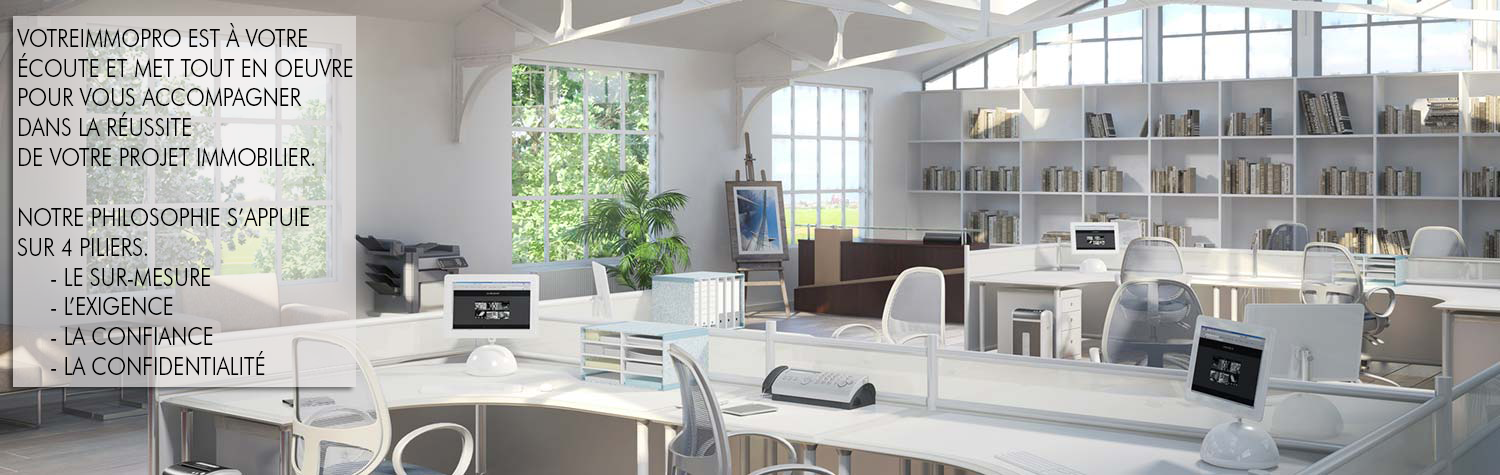
<style>
.page{position:relative;width:1500px;height:475px}
.page>*{position:absolute;margin:0}
.t1{font:24.9px "FuturaBT-Light";color:#000000;text-transform:uppercase;scale:0.87 1}
</style>
<div class="page">
<p class="t1" style="left:17px;top:23px;width:336px;height:353px">Votreimmopro est à votre <br>écoute et met tout en oeuvre <br>pour vous accompagner <br>dans la réussite <br>de votre projet immobilier.<br><br>Notre philosophie s’appuie <br>sur 4 piliers.<br> - Le sur-mesure<br> - l’exigence<br> - La confiance<br> - La confidentialité</p>
</div>
